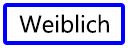
<style>
.page{position:relative;width:128px;height:48px;background:#ffffff}
.page>*{position:absolute;margin:0}
.t1{font:24px "MicrosoftTaiLe";color:#030303}
</style>
<div class="page">
<p class="t1" style="left:19px;top:14px;width:90px;height:19px">Weiblich</p>
</div>
